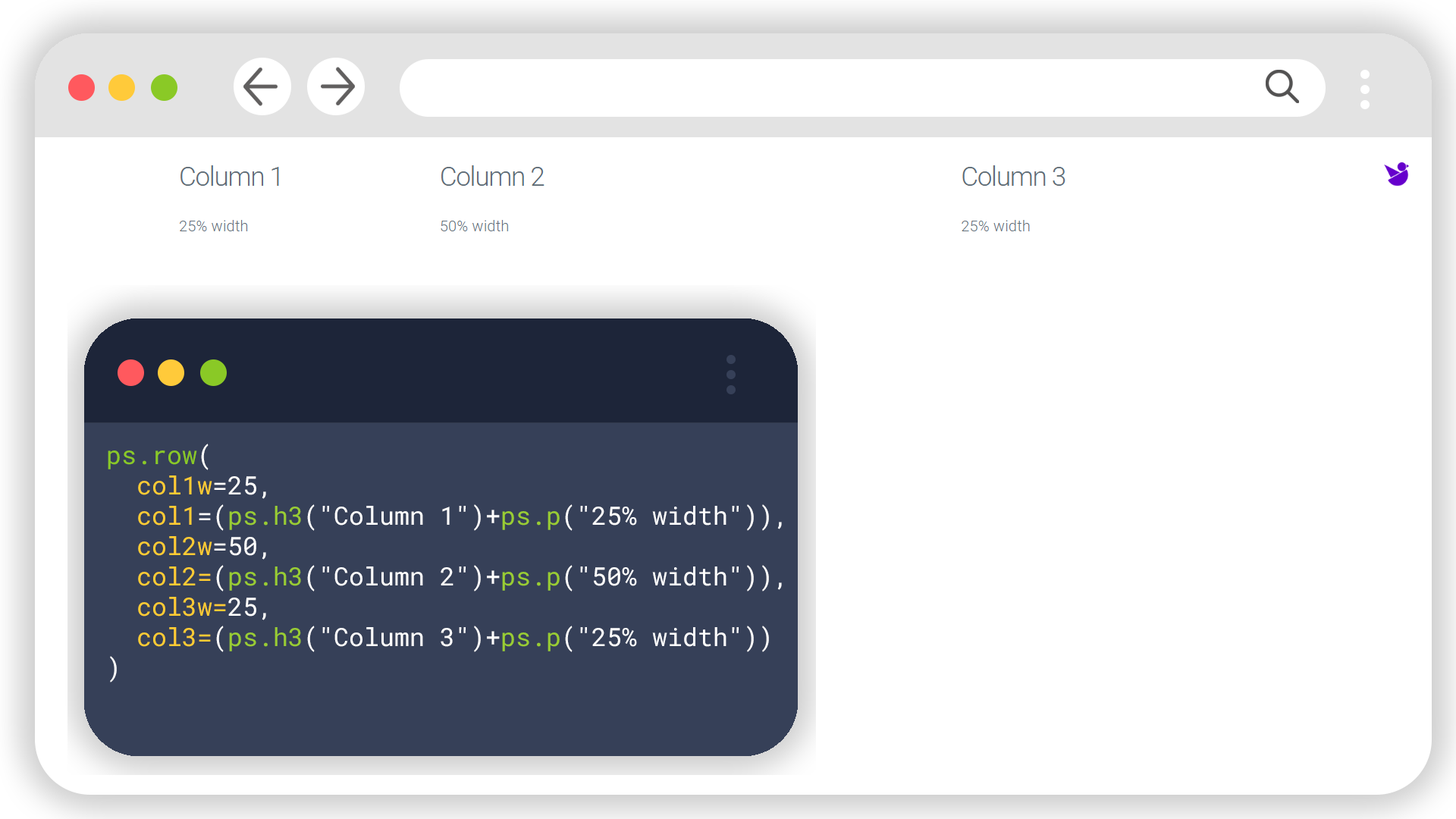
<style>
.page{position:relative;width:1456px;height:819px;background:#ffffff}
.page>*{position:absolute;margin:0}
.t1{font:25.3px "RobotoMono-Regular";color:#ffffff}
.t2{font:25.3px "RobotoMono-Regular";color:#8ac926}
.t3{font:25.3px "RobotoMono-Regular";color:#ffcc33}
.t4{font:25.3px "RobotoMono-Regular";color:#99cc33}
</style>
<div class="page">
<p class="t1" style="left:108px;top:444px;width:674px;height:238px"><span class="t2">ps.row</span>(<br>  <span class="t3">col1w</span>=25,<br>  <span class="t3">col1</span>=(<span class="t4">ps.h3</span>("Column 1")+<span class="t4">ps.p</span>("25% width")),<br>  <span class="t3">col2w</span>=50,<br>  <span class="t3">col2=</span>(<span class="t4">ps.h3</span>("Column 2")+<span class="t4">ps.p</span>("50% width")),<br>  <span class="t3">col3w=</span>25,<br>  <span class="t3">col3=</span>(<span class="t4">ps.h3</span>("Column 3")+<span class="t4">ps.p</span>("25% width"))<br>)</p>
</div>
